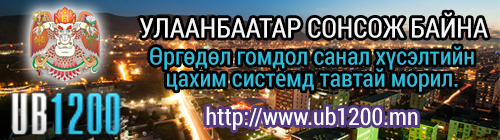
<style>
.page{position:relative;width:500px;height:140px}
.page>*{position:absolute;margin:0}
.t1{font:27px "RobotoCondensed-Regular";color:#ffffff}
.t2{font:24px/22px "RobotoCondensed-Regular";color:#2fbeda}
.t3{font:24px "RobotoCondensed-Regular";color:#ffffff}
</style>
<div class="page">
<p class="t1" style="left:140px;top:12px;width:348px;height:26px">УЛААНБААТАР СОНСОЖ БАЙНА</p>
<p class="t2" style="left:150px;top:46px;width:324px;height:46px;text-align:center">Өргөдөл гомдол санал хүсэлтийн<br>цахим системд тавтай морил.</p>
<p class="t3" style="left:206px;top:106px;width:212px;height:24px">http://www.ub1200.mn</p>
</div>
